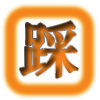
<style>
.page{position:relative;width:100px;height:100px}
.page>*{position:absolute;margin:0}
.t1{font:60px "STZhongsong";font-weight:bold}
</style>
<div class="page">
<p class="t1" style="left:19px;top:21px;width:60px;height:58px">踩</p>
</div>
